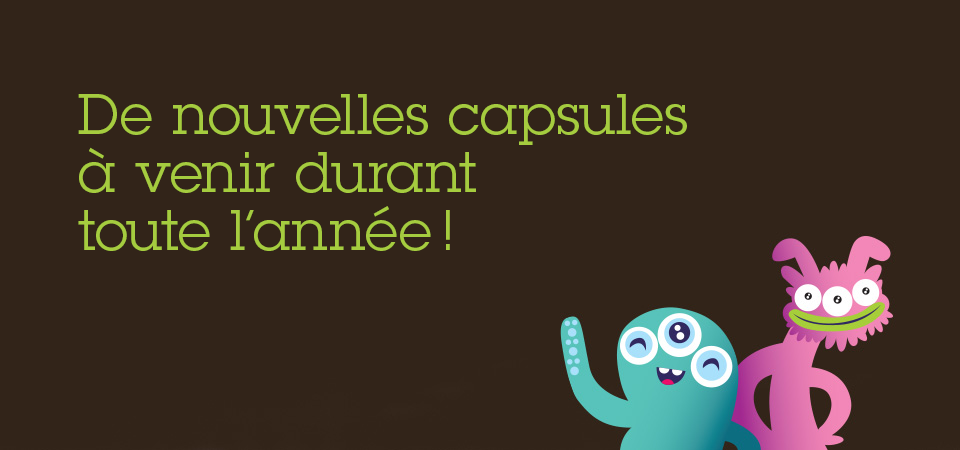
<style>
.page{position:relative;width:960px;height:450px;background:#322419}
.page>*{position:absolute;margin:0}
.t1{font:56px/58px "LubalinGraphStd-Book";letter-spacing:0.025em;color:#a5cc3f}
.t2{font:56px/58px "Sanchez-Regular";letter-spacing:0.05em;color:#a5cc3f}
</style>
<div class="page">
<p class="t1" style="left:78px;top:94px;width:609px;height:157px">De nouvelles capsules<br>à venir durant<br>toute l’année !<br><span class="t2"></span></p>
</div>
